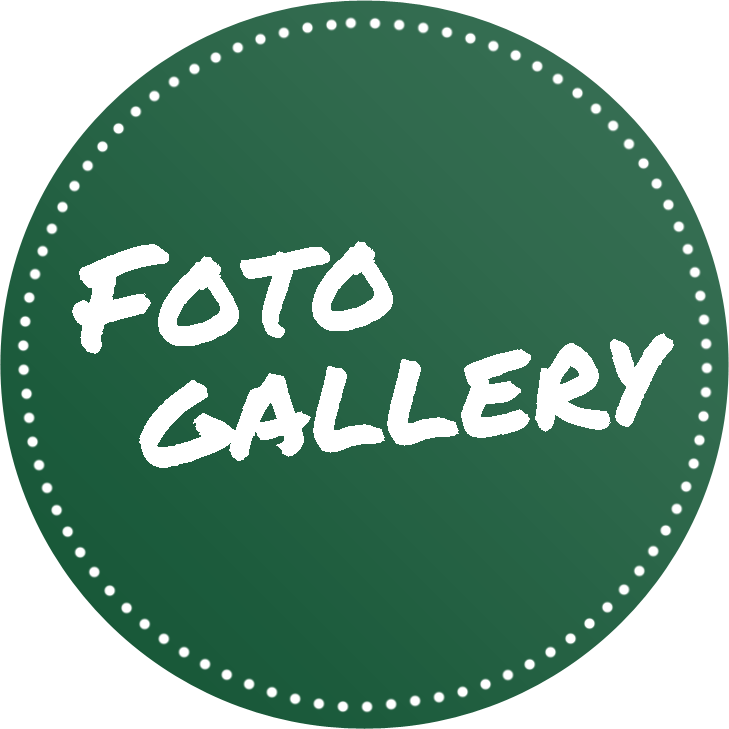
<style>
.page{position:relative;width:729px;height:729px;background:#ffffff}
.page>*{position:absolute;margin:0}
.t1{font:140px/120px "PermanentMarker";color:#ffffff}
.t2{font:140px/36px "PermanentMarker";color:#ffffff}
</style>
<div class="page">
<p class="t1" style="left:72px;top:241px;width:602px;height:227px;rotate:-5deg"><span class="t2">Foto<br></span> gallery</p>
</div>
